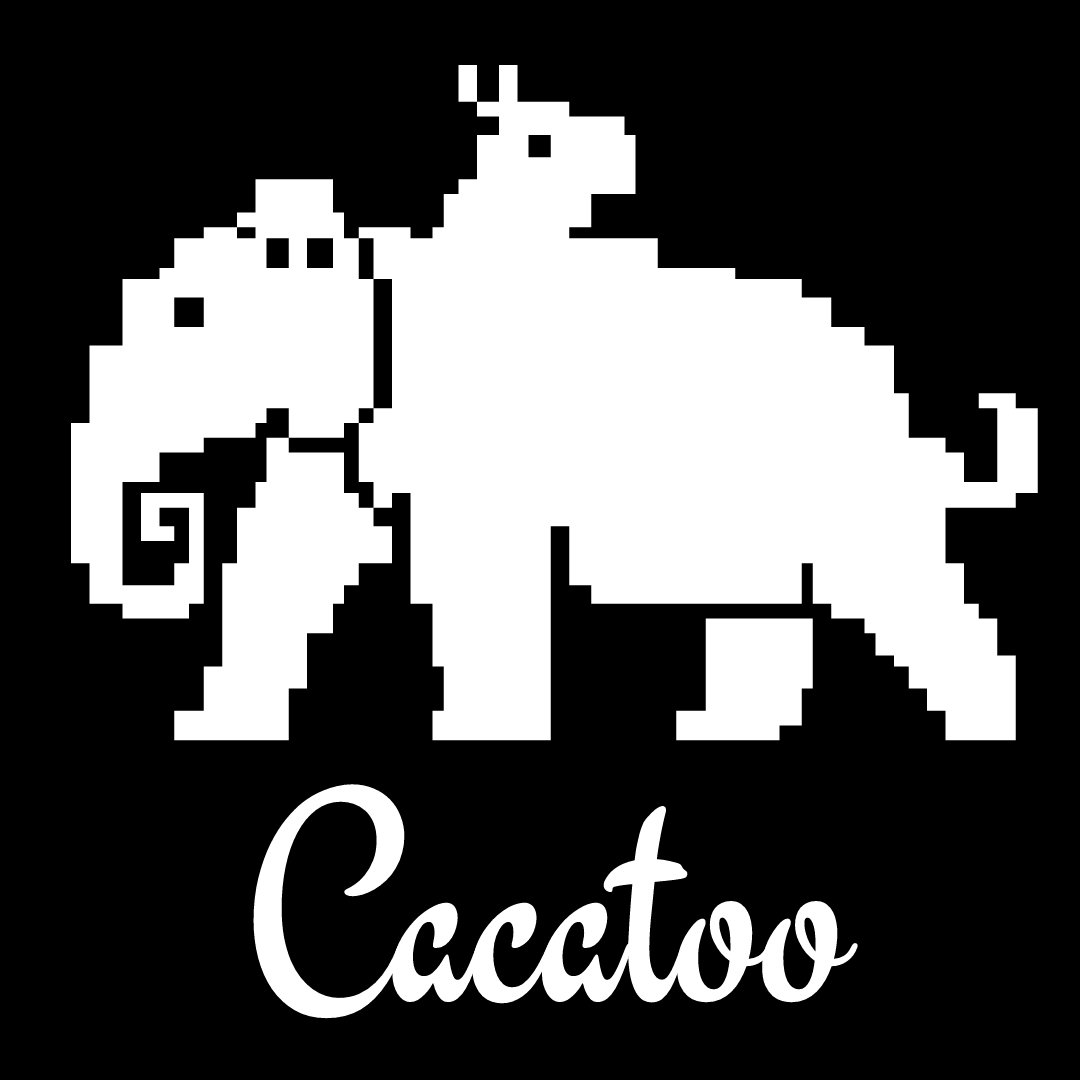
<style>
.page{position:relative;width:1080px;height:1080px;background:#000000}
.page>*{position:absolute;margin:0}
.t1{font:307.6px "Engagement-Regular";color:#ffffff}
</style>
<div class="page">
<p class="t1" style="left:253px;top:784px;width:605px;height:235px">Cacatoo</p>
</div>
